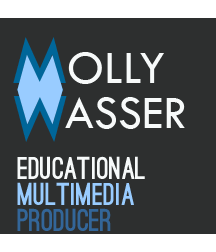
<style>
.page{position:relative;width:216px;height:252px;background:#2d2f2f}
.page>*{position:absolute;margin:0}
.t1{font:48px "TwCenMT-Regular";color:#f7fafa}
.t2{font:30px/26px "OstrichSans-Black";color:#f7fafa}
.t3{font:30px/26px "OstrichSans-Black";color:#99ccff}
.t4{font:30px/26px "OstrichSans-Black";color:#336699}
</style>
<div class="page">
<p class="t1" style="left:68px;top:52px;width:96px;height:32px">OLLY</p>
<p class="t1" style="left:65px;top:97px;width:120px;height:32px">ASSER</p>
<p class="t2" style="left:17px;top:156px;width:128px;height:75px">Educational<br><span class="t3">Multimedia<br></span><span class="t4">Producer</span></p>
</div>
